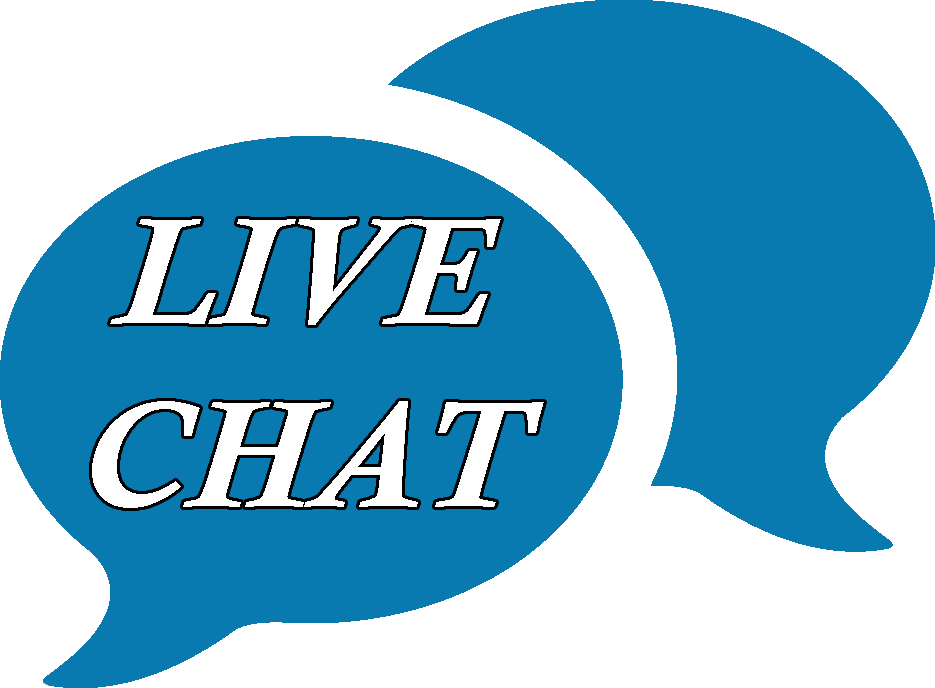
<style>
.page{position:relative;width:935px;height:688px;background:#097aaf}
.page>*{position:absolute;margin:0}
.t1{font:153px "CalistoMT-BoldItalic";color:#ffffff;scale:1.07 1}
.t2{font:153px "AgencyFB-Bold";color:#ffffff;scale:1.07 1}
</style>
<div class="page">
<p class="t1" style="left:92px;top:219px;width:452px;height:289px"><span class="t2"> </span>LIVE <br>CHAT</p>
</div>
